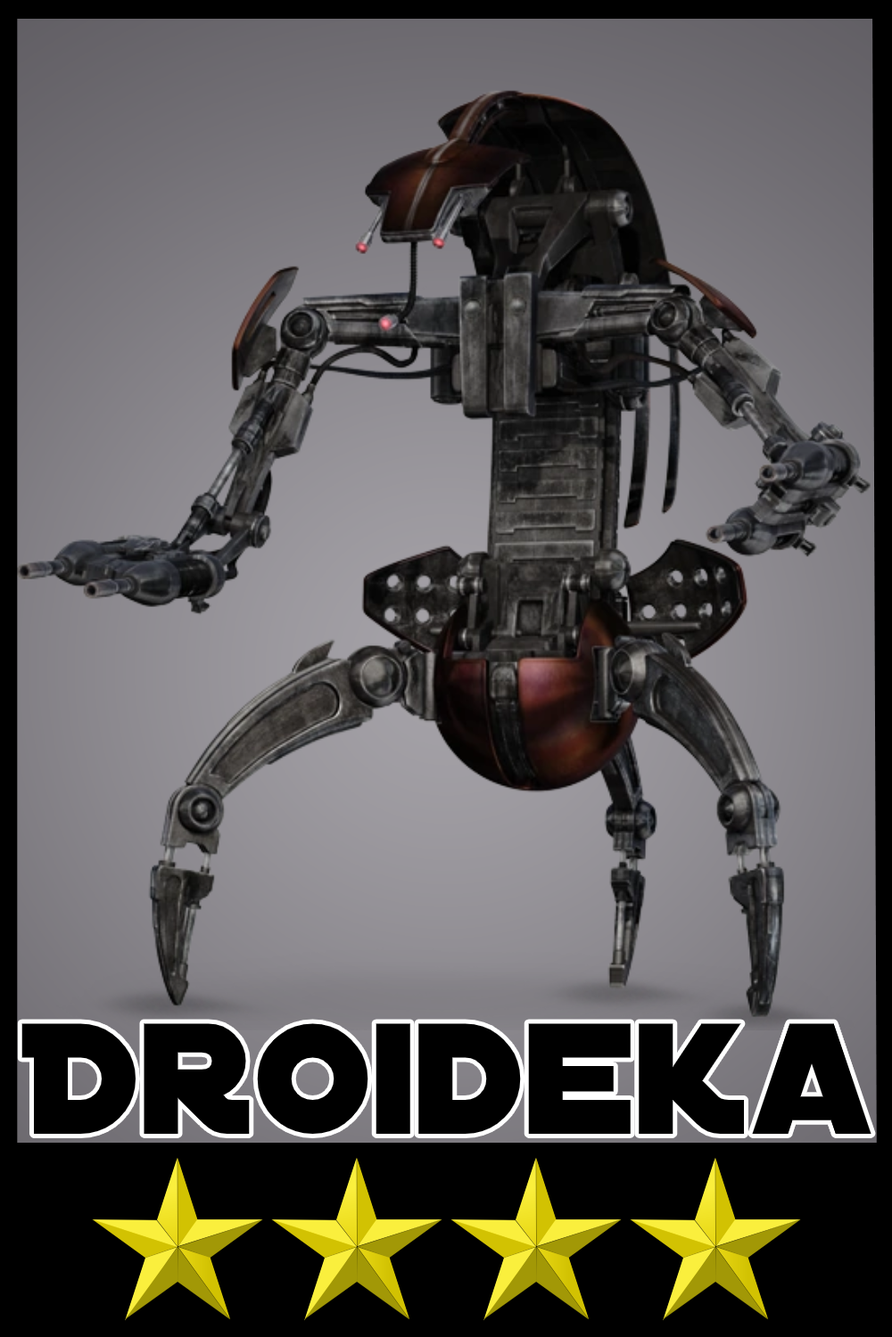
<style>
.page{position:relative;width:892px;height:1337px}
.page>*{position:absolute;margin:0}
.t1{font:169.4px "DistantGalaxy";color:#000000}
</style>
<div class="page">
<p class="t1" style="left:21px;top:1024px;width:850px;height:110px">Droideka</p>
</div>
